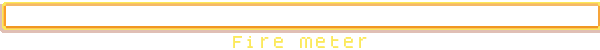
<style>
.page{position:relative;width:600px;height:50px;background:#ffffff}
.page>*{position:absolute;margin:0}
.t1{font:14px "Dogica";color:#fbe95b}
</style>
<div class="page">
<p class="t1" style="left:233px;top:36px;width:134px;height:12px">Fire meter</p>
</div>
